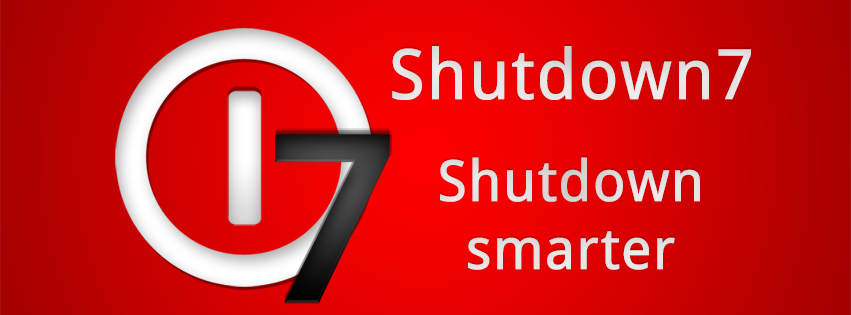
<style>
.page{position:relative;width:851px;height:315px}
.page>*{position:absolute;margin:0}
.t1{font:69px "DroidSans";color:#e6e6e6;font-weight:bold}
.t2{font:56.6px "DroidSans";color:#e2e2e2;font-weight:bold}
</style>
<div class="page">
<p class="t1" style="left:392px;top:46px;width:359px;height:54px">Shutdown7</p>
<p class="t2" style="left:440px;top:157px;width:260px;height:113px;text-align:center">Shutdown<br>smarter</p>
</div>
